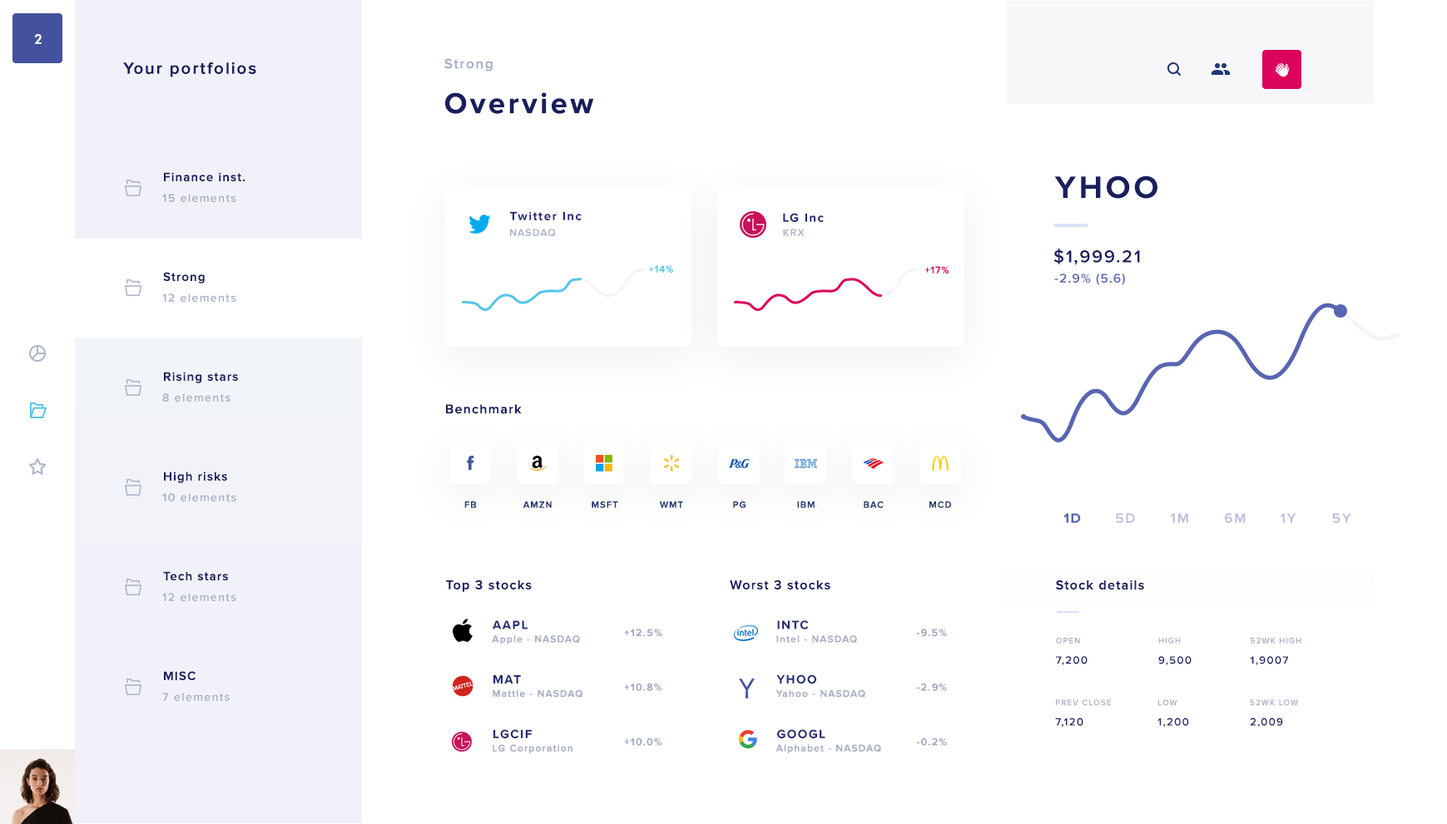
<style>
.page{position:relative;width:1447px;height:824px;background:#ffffff}
.page>*{position:absolute;margin:0}
.t1{font:12.5px "Futura-Medium";color:#ffffff;font-weight:bold}
.t2{font:16.6px "ProximaNova-Semibold";letter-spacing:0.08em;color:#191f5d;font-weight:bold}
.t3{font:14.1px "ProximaNova-Semibold";letter-spacing:0.1em;color:#a7b0c2}
.t4{font:29.9px "ProximaNova-Bold";letter-spacing:0.1em;color:#191f5d}
.t5{font:12.5px "ProximaNova-Semibold";letter-spacing:0.08em;color:#191f5d}
.t6{font:32.2px "ProximaNova-Bold";letter-spacing:0.1em;color:#191f5d}
.t7{font:11.6px "ProximaNova-Semibold";letter-spacing:0.1em;color:#a7b0c2}
.t8{font:12.5px "ProximaNova-Bold";letter-spacing:0.1em;color:#262d73}
.t9{font:10.4px "ProximaNova-Semibold";letter-spacing:0.08em;color:#a7b0c2}
.t10{font:17.9px "ProximaNova-Semibold";letter-spacing:0.08em;color:#191f5d}
.t11{font:10px "ProximaNova-Semibold";letter-spacing:0.08em;color:#54c5eb}
.t12{font:10px "ProximaNova-Semibold";letter-spacing:0.08em;color:#dc045c}
.t13{font:12.9px "ProximaNova-Semibold";letter-spacing:0.08em;color:#5865b2}
.t14{font:13.3px "ProximaNova-Semibold";letter-spacing:0.08em;color:#191f5d}
.t15{font:9.3px "ProximaNova-Semibold";letter-spacing:0.1em;color:#223975}
.t16{font:14.1px "ProximaNova-Bold";letter-spacing:0.1em;color:#5865b2}
.t17{font:14.1px "ProximaNova-Semibold";letter-spacing:0.1em;color:#bbbbdc}
.t18{font:10.4px "ProximaNova-Bold";letter-spacing:0.1em;color:#9da6bb}
.t19{font:10px "ProximaNova-Semibold";letter-spacing:0.1em;color:#a7b0c2}
.t20{font:10.9px/20.3px "ProximaNova-Semibold";letter-spacing:0.1em;color:#212663}
.t21{font:8.3px/18.2px "ProximaNova-Semibold";letter-spacing:0.1em;color:#a0a8be}
</style>
<div class="page">
<p class="t1" style="left:34px;top:34px;width:8px;height:10px">2</p>
<p class="t2" style="left:123px;top:62px;width:133px;height:15px">Your portfolios</p>
<p class="t3" style="left:444px;top:58px;width:48px;height:14px">Strong</p>
<p class="t4" style="left:445px;top:92px;width:149px;height:22px">Overview</p>
<p class="t5" style="left:164px;top:172px;width:81px;height:9px">Finance inst.</p>
<p class="t6" style="left:1054px;top:176px;width:103px;height:23px">YHOO</p>
<p class="t7" style="left:162px;top:194px;width:74px;height:8px">15 elements</p>
<p class="t8" style="left:509px;top:211px;width:72px;height:9px">Twitter Inc</p>
<p class="t8" style="left:783px;top:213px;width:41px;height:9px">LG Inc</p>
<p class="t9" style="left:510px;top:229px;width:46px;height:8px">NASDAQ</p>
<p class="t9" style="left:783px;top:229px;width:21px;height:7px">KRX</p>
<p class="t10" style="left:1053px;top:249px;width:87px;height:16px">$1,999.21</p>
<p class="t11" style="left:649px;top:265px;width:24px;height:8px">+14%</p>
<p class="t12" style="left:924px;top:266px;width:25px;height:8px">+17%</p>
<p class="t5" style="left:163px;top:272px;width:42px;height:12px">Strong</p>
<p class="t13" style="left:1054px;top:274px;width:71px;height:11px">-2.9% (5.6)</p>
<p class="t7" style="left:162px;top:294px;width:74px;height:8px">12 elements</p>
<p class="t5" style="left:164px;top:372px;width:74px;height:11px">Rising stars</p>
<p class="t7" style="left:162px;top:393px;width:68px;height:9px">8 elements</p>
<p class="t14" style="left:446px;top:404px;width:76px;height:10px">Benchmark</p>
<p class="t5" style="left:164px;top:472px;width:63px;height:11px">High risks</p>
<p class="t7" style="left:162px;top:493px;width:74px;height:9px">10 elements</p>
<p class="t15" style="left:464px;top:502px;width:13px;height:6px">FB</p>
<p class="t15" style="left:522px;top:502px;width:29px;height:6px">AMZN</p>
<p class="t15" style="left:591px;top:502px;width:27px;height:6px">MSFT</p>
<p class="t15" style="left:660px;top:502px;width:23px;height:6px">WMT</p>
<p class="t15" style="left:733px;top:502px;width:12px;height:6px">PG</p>
<p class="t15" style="left:797px;top:502px;width:17px;height:6px">IBM</p>
<p class="t15" style="left:863px;top:502px;width:20px;height:6px">BAC</p>
<p class="t15" style="left:929px;top:502px;width:22px;height:6px">MCD</p>
<p class="t16" style="left:1063px;top:513px;width:18px;height:10px">1D</p>
<p class="t17" style="left:1115px;top:513px;width:20px;height:10px">5D</p>
<p class="t17" style="left:1170px;top:513px;width:18px;height:10px">1M</p>
<p class="t17" style="left:1224px;top:513px;width:21px;height:10px">6M</p>
<p class="t17" style="left:1279px;top:513px;width:17px;height:10px">1Y</p>
<p class="t17" style="left:1332px;top:513px;width:19px;height:10px">5Y</p>
<p class="t5" style="left:163px;top:571px;width:65px;height:10px">Tech stars</p>
<p class="t14" style="left:446px;top:580px;width:86px;height:12px">Top 3 stocks</p>
<p class="t14" style="left:730px;top:580px;width:100px;height:10px">Worst 3 stocks</p>
<p class="t14" style="left:1056px;top:580px;width:88px;height:10px">Stock details</p>
<p class="t7" style="left:162px;top:593px;width:74px;height:8px">12 elements</p>
<p class="t8" style="left:492px;top:621px;width:35px;height:9px">AAPL</p>
<p class="t18" style="left:624px;top:629px;width:38px;height:8px">+12.5%</p>
<p class="t8" style="left:777px;top:621px;width:32px;height:9px">INTC</p>
<p class="t18" style="left:917px;top:629px;width:30px;height:8px">-9.5%</p>
<p class="t19" style="left:492px;top:636px;width:88px;height:9px">Apple - NASDAQ</p>
<p class="t19" style="left:776px;top:636px;width:81px;height:7px">Intel - NASDAQ</p>
<p class="t20" style="left:1056px;top:638px;width:31px;height:27px"><span class="t21">OPEN<br></span>7,200</p>
<p class="t20" style="left:1158px;top:638px;width:33px;height:27px"><span class="t21">HIGH<br></span>9,500</p>
<p class="t21" style="left:1249px;top:638px;width:52px;height:27px">52WK HIGH<br><span class="t20">1,9007</span></p>
<p class="t5" style="left:164px;top:671px;width:31px;height:9px">MISC</p>
<p class="t8" style="left:493px;top:675px;width:28px;height:9px">MAT</p>
<p class="t8" style="left:776px;top:675px;width:40px;height:10px">YHOO</p>
<p class="t19" style="left:492px;top:690px;width:90px;height:8px">Mattle - NASDAQ</p>
<p class="t18" style="left:624px;top:684px;width:38px;height:7px">+10.8%</p>
<p class="t19" style="left:775px;top:690px;width:90px;height:8px">Yahoo - NASDAQ</p>
<p class="t18" style="left:917px;top:684px;width:30px;height:7px">-2.9%</p>
<p class="t7" style="left:162px;top:693px;width:68px;height:8px">7 elements</p>
<p class="t21" style="left:1055px;top:700px;width:55px;height:28px">PREV CLOSE<br><span class="t20">7,120</span></p>
<p class="t20" style="left:1157px;top:700px;width:32px;height:28px"><span class="t21">LOW<br></span>1,200</p>
<p class="t21" style="left:1249px;top:700px;width:49px;height:28px">52WK LOW<br><span class="t20">2,009</span></p>
<p class="t8" style="left:493px;top:730px;width:39px;height:9px">LGCIF</p>
<p class="t18" style="left:624px;top:738px;width:38px;height:8px">+10.0%</p>
<p class="t8" style="left:777px;top:730px;width:48px;height:9px">GOOGL</p>
<p class="t18" style="left:917px;top:738px;width:30px;height:8px">-0.2%</p>
<p class="t19" style="left:492px;top:744px;width:80px;height:10px">LG Corporation</p>
<p class="t19" style="left:775px;top:744px;width:106px;height:10px">Alphabet - NASDAQ</p>
</div>
